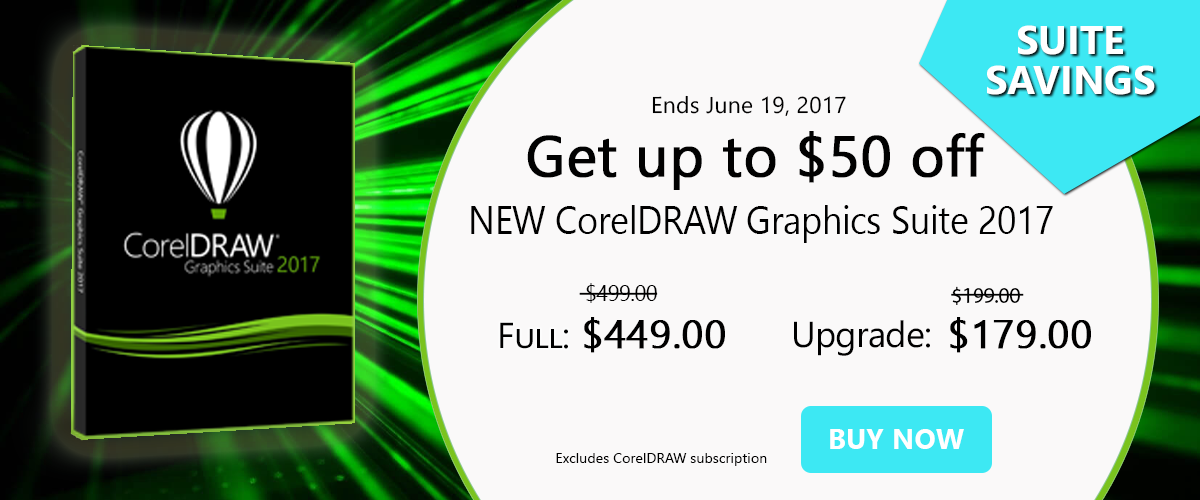
<style>
.page{position:relative;width:1200px;height:500px;background:#faf9f9}
.page>*{position:absolute;margin:0}
.t1{font:40px "SegoeUI-Bold";color:#ffffff;text-transform:uppercase}
.t2{font:22.9px "SegoeUI";letter-spacing:0.01em;color:#000000}
.t3{font:57.3px "SegoeUI";color:#010101;font-weight:bold}
.t4{font:39.5px "SegoeUI";letter-spacing:-0.01em;color:#000000;scale:0.91 1}
.t5{font:22px "SegoeUI";letter-spacing:-0.025em;color:#000000;font-variant:small-caps}
.t6{font:22px "MyriadPro-Regular";letter-spacing:-0.025em;color:#000000;font-variant:small-caps}
.t7{font:40px "SegoeUI";color:#000000;font-variant:small-caps;font-weight:bold}
.t8{font:36px "SegoeUI";letter-spacing:-0.02em;color:#000000;font-variant:small-caps}
.t9{font:36px "SegoeUI";letter-spacing:-0.02em;color:#000000}
.t10{font:28px "SegoeUI-Bold";letter-spacing:0.01em;color:#ffffff}
.t11{font:14px "SegoeUI";letter-spacing:0.01em;color:#000000}
</style>
<div class="page">
<p class="t1" style="left:1018px;top:25px;width:105px;height:30px">SUITE</p>
<p class="t1" style="left:987px;top:65px;width:168px;height:30px">SAVINGS</p>
<p class="t2" style="left:652px;top:95px;width:194px;height:21px">Ends June 19, 2017</p>
<p class="t3" style="left:527px;top:131px;width:458px;height:59px">Get up to $50 off</p>
<p class="t4" style="left:471px;top:205px;width:582px;height:38px">NEW CorelDRAW Graphics Suite 2017</p>
<p class="t5" style="left:586px;top:283px;width:71px;height:20px">$499.00</p>
<p class="t6" style="left:952px;top:286px;width:68px;height:19px">$199.00</p>
<p class="t7" style="left:584px;top:317px;width:141px;height:36px">$449.00</p>
<p class="t7" style="left:950px;top:317px;width:141px;height:36px">$179.00</p>
<p class="t8" style="left:500px;top:322px;width:68px;height:27px">Full:</p>
<p class="t9" style="left:794px;top:320px;width:136px;height:36px">Upgrade:</p>
<p class="t10" style="left:830px;top:429px;width:134px;height:20px">BUY NOW</p>
<p class="t11" style="left:556px;top:453px;width:211px;height:13px">Excludes CorelDRAW subscription</p>
</div>
